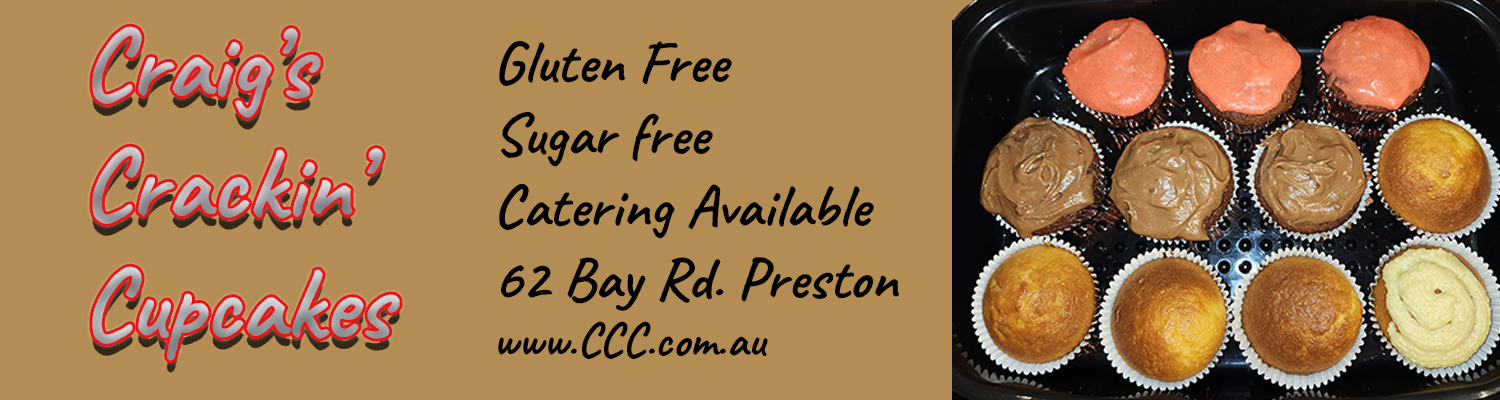
<style>
.page{position:relative;width:1500px;height:400px;background:#b48d54}
.page>*{position:absolute;margin:0}
.t1{font:100px "Caveat-Bold"}
.t2{font:60px "Caveat-Bold";color:#000000}
.t3{font:48px "Caveat-Bold";color:#000000}
</style>
<div class="page">
<p class="t1" style="left:92px;top:26px;width:308px;height:335px;text-align:justify">Craig’s<br>Crackin’<br>Cupcakes</p>
<p class="t2" style="left:498px;top:41px;width:401px;height:318px;text-align:justify">Gluten Free<br>Sugar free<br>Catering Available<br>62 Bay Rd. Preston<br><span class="t3">www.CCC.com.au</span></p>
</div>
